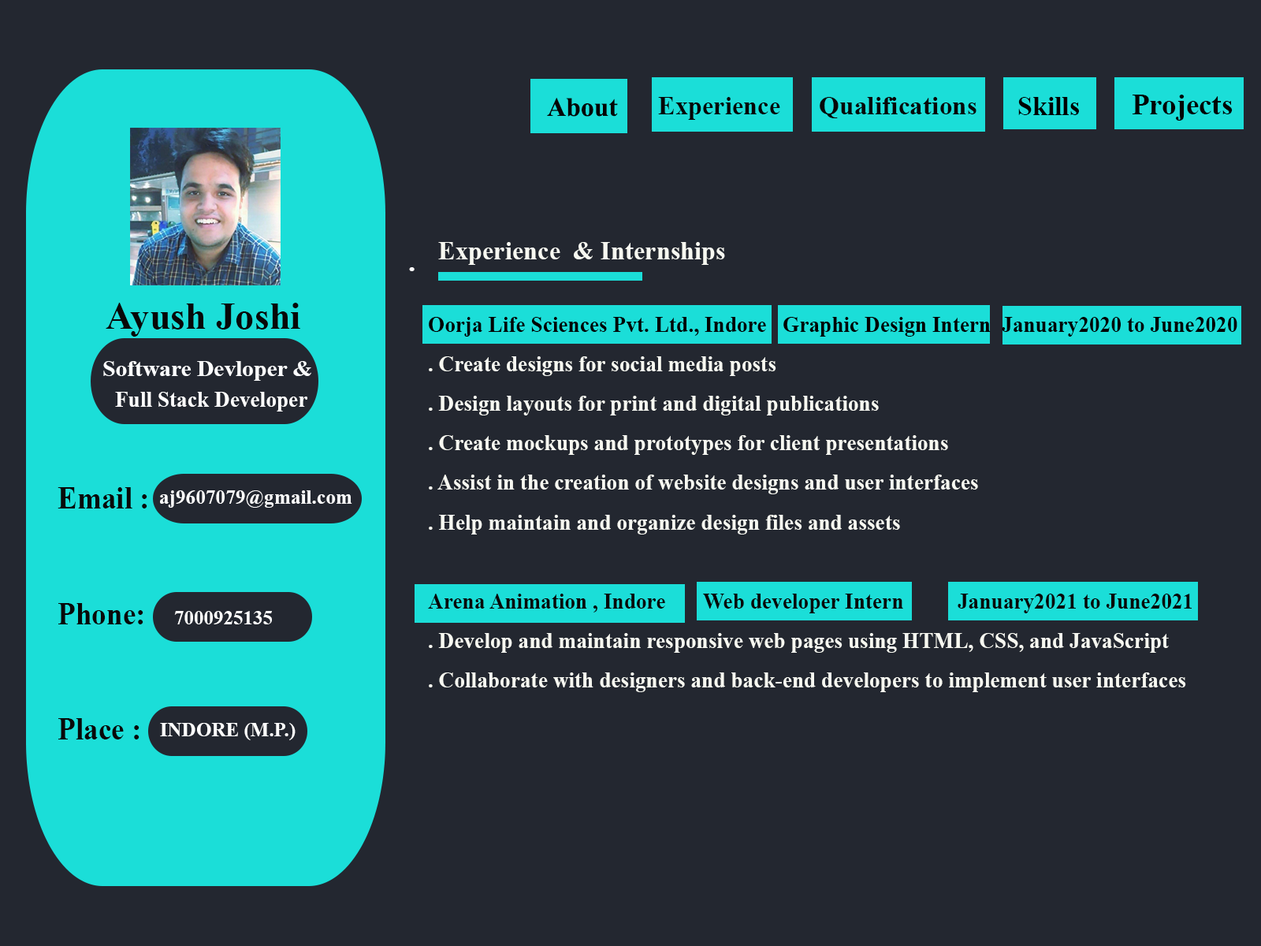
<style>
.page{position:relative;width:1261px;height:946px;background:#232730}
.page>*{position:absolute;margin:0}
.t1{font:26.5px "TimesNewRomanPS-BoldMT";color:#050505}
.t2{font:25.8px "TimesNewRomanPS-BoldMT";color:#060606}
.t3{font:25.8px "TimesNewRomanPS-BoldMT";color:#070707}
.t4{font:26.5px "TimesNewRomanPS-BoldMT";color:#010101}
.t5{font:29.2px "TimesNewRomanPS-BoldMT";color:#030303}
.t6{font:25.8px "TimesNewRomanPS-BoldMT";color:#f7f8f1}
.t7{font:29.4px "TimesNewRomanPS-BoldMT";color:#ffffff}
.t8{font:38.1px "TimesNewRomanPS-BoldMT";color:#080808}
.t9{font:21.7px "TimesNewRomanPS-BoldMT";color:#f7f8f1}
.t10{font:21.7px "TimesNewRomanPS-BoldMT";color:#020202}
.t11{font:21.7px "TimesNewRomanPS-BoldMT";color:#080808}
.t12{font:23.1px "TimesNewRomanPS-BoldMT";color:#fcfdfe}
.t13{font:21.8px "TimesNewRomanPS-BoldMT";color:#ffffff}
.t14{font:31.7px "TimesNewRomanPS-BoldMT";color:#090909;scale:0.93 1}
.t15{font:19.7px "TimesNewRomanPS-BoldMT";color:#ffffff}
</style>
<div class="page">
<p class="t1" style="left:547px;top:98px;width:71px;height:19px">About</p>
<p class="t2" style="left:658px;top:97px;width:122px;height:23px">Experience</p>
<p class="t3" style="left:820px;top:97px;width:156px;height:21px">Qualifications</p>
<p class="t4" style="left:1018px;top:97px;width:61px;height:18px">Skills</p>
<p class="t5" style="left:1132px;top:95px;width:101px;height:26px">Projects</p>
<p class="t6" style="left:438px;top:242px;width:287px;height:23px">Experience  &amp; Internships</p>
<p class="t7" style="left:409px;top:267px;width:6px;height:4px">.</p>
<p class="t8" style="left:106px;top:303px;width:194px;height:34px">Ayush Joshi</p>
<p class="t9" style="left:428px;top:317px;width:809px;height:375px"><span class="t10">Oorja Life Sciences Pvt. Ltd., Indore   Graphic Design Intern  January2020 to June2020<br></span>. Create designs for social media posts<br>. Design layouts for print and digital publications<br>. Create mockups and prototypes for client presentations<br>. Assist in the creation of website designs and user interfaces<br>. Help maintain and organize design files and assets<br><br><span class="t11">Arena Animation , Indore       Web developer Intern          January2021 to June2021<br></span>. Develop and maintain responsive web pages using HTML, CSS, and JavaScript<br>. Collaborate with designers and back-end developers to implement user interfaces</p>
<p class="t12" style="left:103px;top:361px;width:208px;height:20px">Software Devloper &amp;</p>
<p class="t13" style="left:115px;top:392px;width:192px;height:19px">Full Stack Developer</p>
<p class="t14" style="left:58px;top:487px;width:89px;height:252px">Email : <br><br>Phone:<br><br>Place :</p>
<p class="t15" style="left:160px;top:490px;width:192px;height:18px">aj9607079@gmail.com</p>
<p class="t15" style="left:174px;top:611px;width:98px;height:13px">7000925135</p>
<p class="t15" style="left:160px;top:723px;width:136px;height:17px">INDORE (M.P.)</p>
</div>
